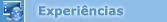
<style>
.page{position:relative;width:167px;height:22px;background:#8fbee8}
.page>*{position:absolute;margin:0}
.t1{font:12px "Verdana-Bold";color:#5292cc}
</style>
<div class="page">
<p class="t1" style="left:39px;top:5px;width:85px;height:13px">Experiências</p>
</div>
